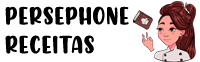
<style>
.page{position:relative;width:200px;height:62px;background:#ffffff}
.page>*{position:absolute;margin:0}
.t1{font:24px/28.8px "ChickenQuiche";letter-spacing:0.025em;color:#000000;text-transform:uppercase;font-weight:bold}
</style>
<div class="page">
<p class="t1" style="left:5px;top:6px;width:124px;height:48px">Persephone<br>Receitas</p>
</div>
